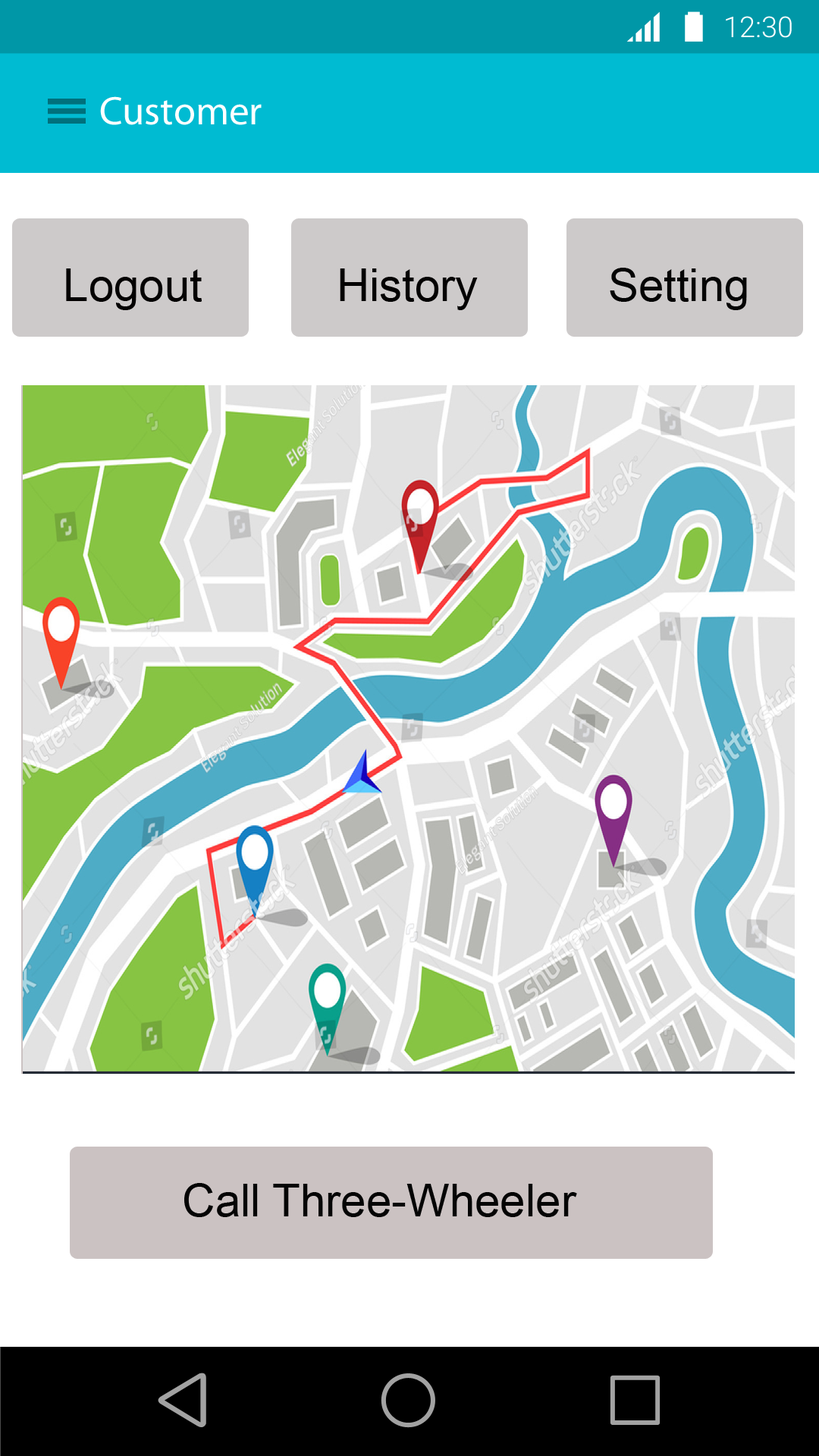
<style>
.page{position:relative;width:819px;height:1456px;background:#ffffff}
.page>*{position:absolute;margin:0}
.t1{font:28.8px "Roboto-Light";color:#ffffff}
.t2{font:40.2px "MyriadPro-Regular";color:#ffffff}
.t3{font:45.5px "ArialMT";color:#030101}
.t4{font:45.5px "ArialMT";color:#040404}
</style>
<div class="page">
<p class="t1" style="left:726px;top:16px;width:66px;height:22px">12:30</p>
<p class="t2" style="left:100px;top:96px;width:162px;height:29px">Customer</p>
<p class="t3" style="left:66px;top:268px;width:136px;height:42px">Logout</p>
<p class="t3" style="left:340px;top:268px;width:138px;height:42px">History</p>
<p class="t4" style="left:610px;top:268px;width:137px;height:42px">Setting</p>
<p class="t4" style="left:184px;top:1183px;width:393px;height:34px">Call Three-Wheeler</p>
</div>
